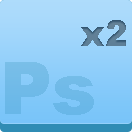
<style>
.page{position:relative;width:132px;height:132px}
.page>*{position:absolute;margin:0}
.t1{font:36px "Arial-Black";color:#5e7f97}
.t2{font:72px "Arial-Black";color:#6fbae8}
</style>
<div class="page">
<p class="t1" style="left:81px;top:20px;width:45px;height:26px">x2</p>
<p class="t2" style="left:5px;top:62px;width:89px;height:53px">Ps</p>
</div>
